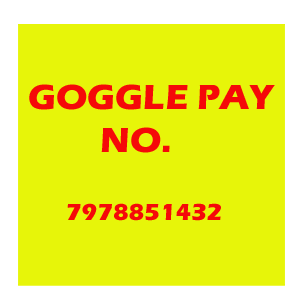
<style>
.page{position:relative;width:300px;height:300px;background:#e7f509}
.page>*{position:absolute;margin:0}
.t1{font:36px "ErasITC-Bold";color:#f50909}
.t2{font:24px "ErasITC-Bold";color:#f50909}
</style>
<div class="page">
<p class="t1" style="left:29px;top:84px;width:246px;height:69px">GOGGLE PAY<br>        NO.</p>
<p class="t2" style="left:67px;top:203px;width:154px;height:18px">7978851432</p>
</div>
